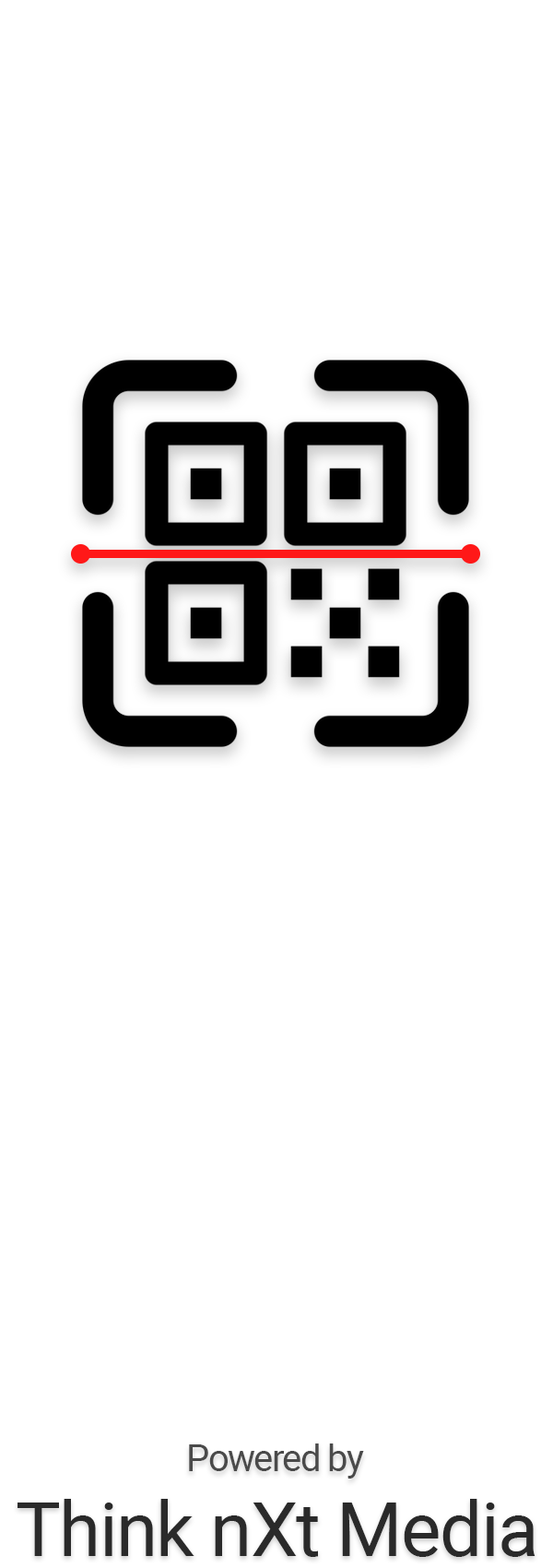
<style>
.page{position:relative;width:553px;height:1568px;background:#ffffff}
.page>*{position:absolute;margin:0}
.t1{font:36.9px "Roboto-Regular";letter-spacing:-0.04em;color:#4a4a4a}
.t2{font:75.6px "Roboto-Regular";letter-spacing:-0.02em;color:#2a2a2a}
</style>
<div class="page">
<p class="t1" style="left:189px;top:1443px;width:175px;height:36px">Powered by</p>
<p class="t2" style="left:18px;top:1499px;width:518px;height:58px">Think nXt Media</p>
</div>
